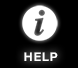
<style>
.page{position:relative;width:78px;height:68px;background:#000000}
.page>*{position:absolute;margin:0}
.t1{font:12.1px "AlteHaasGrotesk_Bold";letter-spacing:0.05em;color:#ffffff}
</style>
<div class="page">
<p class="t1" style="left:24px;top:52px;width:34px;height:9px">HELP</p>
</div>
